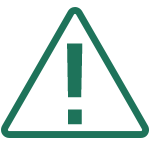
<style>
.page{position:relative;width:150px;height:150px;background:#ffffff}
.page>*{position:absolute;margin:0}
.t1{font:120.8px "EurostileBold";letter-spacing:0.08em;color:#1e735a}
</style>
<div class="page">
<p class="t1" style="left:67px;top:43px;width:16px;height:82px">!</p>
</div>
